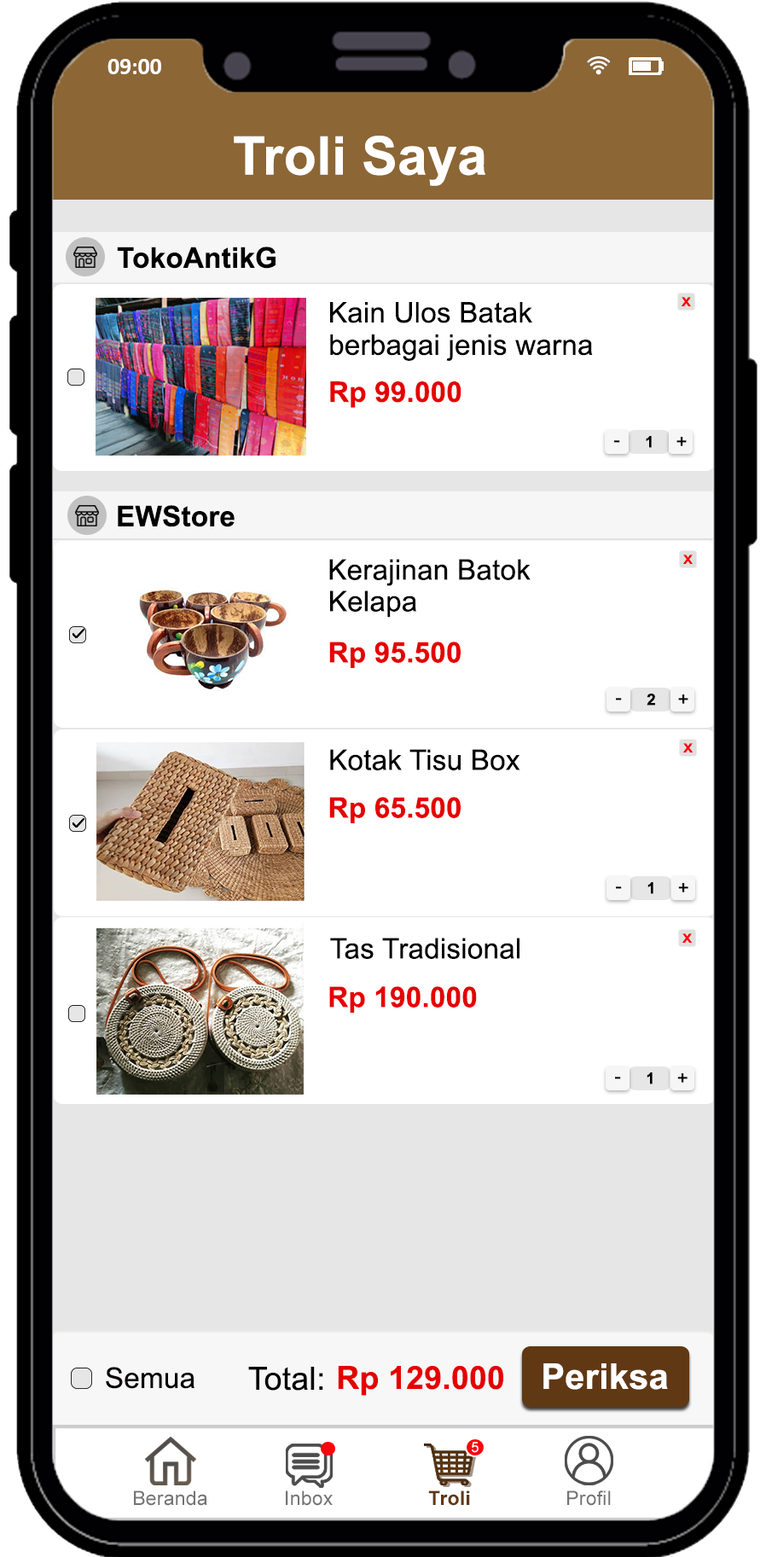
<style>
.page{position:relative;width:766px;height:1557px;background:#ffffff}
.page>*{position:absolute;margin:0}
.t1{font:23.6px "Calibri-Bold";color:#ffffff}
.t2{font:53.3px "Arial-BoldMT";letter-spacing:0.005em;color:#ffffff}
.t3{font:28.4px "Arial-BoldMT";letter-spacing:0.005em;color:#000000}
.t4{font:28.3px "ArialMT";letter-spacing:0.005em;color:#000000}
.t5{font:28.3px "Arial-BoldMT";letter-spacing:0.005em;color:#e50000}
.t6{font:15.8px "Arial-BoldMT";letter-spacing:0.005em;color:#000000}
.t7{font:19.1px "ArialMT";letter-spacing:0.005em;color:#000000}
.t8{font:28.4px "ArialMT";letter-spacing:0.005em;color:#000000}
.t9{font:28.4px "Arial-BoldMT";letter-spacing:0.005em;color:#e50000}
.t10{font:28.4px "ArialMT";letter-spacing:0.005em;color:#080303}
.t11{font:32px "ArialMT";letter-spacing:0.005em;color:#000000}
.t12{font:32px "Arial-BoldMT";letter-spacing:0.005em;color:#e50000}
.t13{font:35.5px "Arial-BoldMT";letter-spacing:0.005em;color:#ffffff}
.t14{font:14.2px "ArialMT";letter-spacing:0.01em;color:#ffffff}
.t15{font:19.6px "ArialMT";letter-spacing:0.01em;color:#737373}
.t16{font:19.6px "Arial-BoldMT";letter-spacing:0.01em;color:#603813}
</style>
<div class="page">
<p class="t1" style="left:107px;top:59px;width:54px;height:15px">09:00</p>
<p class="t2" style="left:234px;top:136px;width:251px;height:50px">Troli Saya</p>
<p class="t3" style="left:117px;top:247px;width:159px;height:22px">TokoAntikG</p>
<p class="t4" style="left:330px;top:302px;width:202px;height:21px">Kain Ulos Batak</p>
<p class="t4" style="left:330px;top:334px;width:263px;height:27px">berbagai jenis warna</p>
<p class="t5" style="left:330px;top:381px;width:131px;height:27px">Rp 99.000</p>
<p class="t6" style="left:646px;top:436px;width:6px;height:12px">1</p>
<p class="t7" style="left:676px;top:437px;width:11px;height:9px">+</p>
<p class="t7" style="left:614px;top:440px;width:6px;height:3px">-</p>
<p class="t3" style="left:118px;top:505px;width:117px;height:22px">EWStore</p>
<p class="t8" style="left:329px;top:559px;width:202px;height:27px">Kerajinan Batok</p>
<p class="t8" style="left:330px;top:590px;width:86px;height:28px">Kelapa</p>
<p class="t9" style="left:329px;top:641px;width:132px;height:27px">Rp 95.500</p>
<p class="t7" style="left:616px;top:698px;width:6px;height:2px">-</p>
<p class="t6" style="left:647px;top:693px;width:8px;height:12px">2</p>
<p class="t7" style="left:678px;top:694px;width:10px;height:10px">+</p>
<p class="t8" style="left:330px;top:749px;width:190px;height:21px">Kotak Tisu Box</p>
<p class="t9" style="left:329px;top:797px;width:132px;height:26px">Rp 65.500</p>
<p class="t6" style="left:647px;top:882px;width:6px;height:12px">1</p>
<p class="t7" style="left:616px;top:886px;width:6px;height:3px">-</p>
<p class="t7" style="left:678px;top:883px;width:10px;height:9px">+</p>
<p class="t8" style="left:330px;top:937px;width:189px;height:22px">Tas Tradisional</p>
<p class="t9" style="left:329px;top:986px;width:148px;height:27px">Rp 190.000</p>
<p class="t6" style="left:647px;top:1072px;width:6px;height:12px">1</p>
<p class="t7" style="left:677px;top:1073px;width:11px;height:9px">+</p>
<p class="t7" style="left:615px;top:1076px;width:6px;height:3px">-</p>
<p class="t10" style="left:106px;top:1367px;width:88px;height:22px">Semua</p>
<p class="t11" style="left:248px;top:1367px;width:75px;height:23px">Total:</p>
<p class="t12" style="left:338px;top:1366px;width:165px;height:30px">Rp 129.000</p>
<p class="t13" style="left:543px;top:1363px;width:125px;height:27px">Periksa</p>
<p class="t14" style="left:472px;top:1442px;width:7px;height:11px">5</p>
<p class="t15" style="left:134px;top:1490px;width:73px;height:16px">Beranda</p>
<p class="t15" style="left:286px;top:1490px;width:47px;height:16px">Inbox</p>
<p class="t16" style="left:428px;top:1490px;width:42px;height:16px">Troli</p>
<p class="t15" style="left:567px;top:1490px;width:44px;height:16px">Profil</p>
</div>
